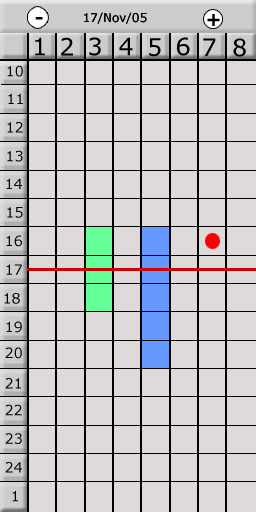
<style>
.page{position:relative;width:256px;height:512px;background:#dedada}
.page>*{position:absolute;margin:0}
.t1{font:18px "Verdana-Bold";color:#000000}
.t2{font:12px "Verdana";color:#000000}
.t3{font:24px "Verdana";color:#000000}
.t4{font:14px "Verdana";color:#000000}
</style>
<div class="page">
<p class="t1" style="left:35px;top:17px;width:8px;height:3px">-</p>
<p class="t2" style="left:84px;top:12px;width:63px;height:12px">17/Nov/05</p>
<p class="t1" style="left:207px;top:14px;width:13px;height:12px">+</p>
<p class="t3" style="left:35px;top:37px;width:10px;height:19px">1</p>
<p class="t3" style="left:61px;top:37px;width:12px;height:19px">2</p>
<p class="t3" style="left:89px;top:37px;width:12px;height:19px">3</p>
<p class="t3" style="left:119px;top:37px;width:14px;height:19px">4</p>
<p class="t3" style="left:149px;top:38px;width:12px;height:19px">5</p>
<p class="t3" style="left:177px;top:37px;width:13px;height:19px">6</p>
<p class="t3" style="left:203px;top:38px;width:13px;height:18px">7</p>
<p class="t3" style="left:233px;top:38px;width:13px;height:19px">8</p>
<p class="t4" style="left:7px;top:65px;width:16px;height:12px">10</p>
<p class="t4" style="left:8px;top:93px;width:15px;height:11px">11</p>
<p class="t4" style="left:7px;top:122px;width:16px;height:11px">12</p>
<p class="t4" style="left:7px;top:150px;width:16px;height:12px">13</p>
<p class="t4" style="left:6px;top:178px;width:16px;height:11px">14</p>
<p class="t4" style="left:7px;top:207px;width:16px;height:11px">15</p>
<p class="t4" style="left:6px;top:235px;width:16px;height:12px">16</p>
<p class="t4" style="left:6px;top:264px;width:16px;height:11px">17</p>
<p class="t4" style="left:4px;top:293px;width:16px;height:11px">18</p>
<p class="t4" style="left:6px;top:321px;width:16px;height:12px">19</p>
<p class="t4" style="left:5px;top:347px;width:17px;height:12px">20</p>
<p class="t4" style="left:5px;top:378px;width:16px;height:11px">21</p>
<p class="t4" style="left:5px;top:404px;width:17px;height:12px">22</p>
<p class="t4" style="left:5px;top:433px;width:17px;height:11px">23</p>
<p class="t4" style="left:5px;top:462px;width:17px;height:11px">24</p>
<p class="t4" style="left:12px;top:491px;width:6px;height:11px">1</p>
</div>
